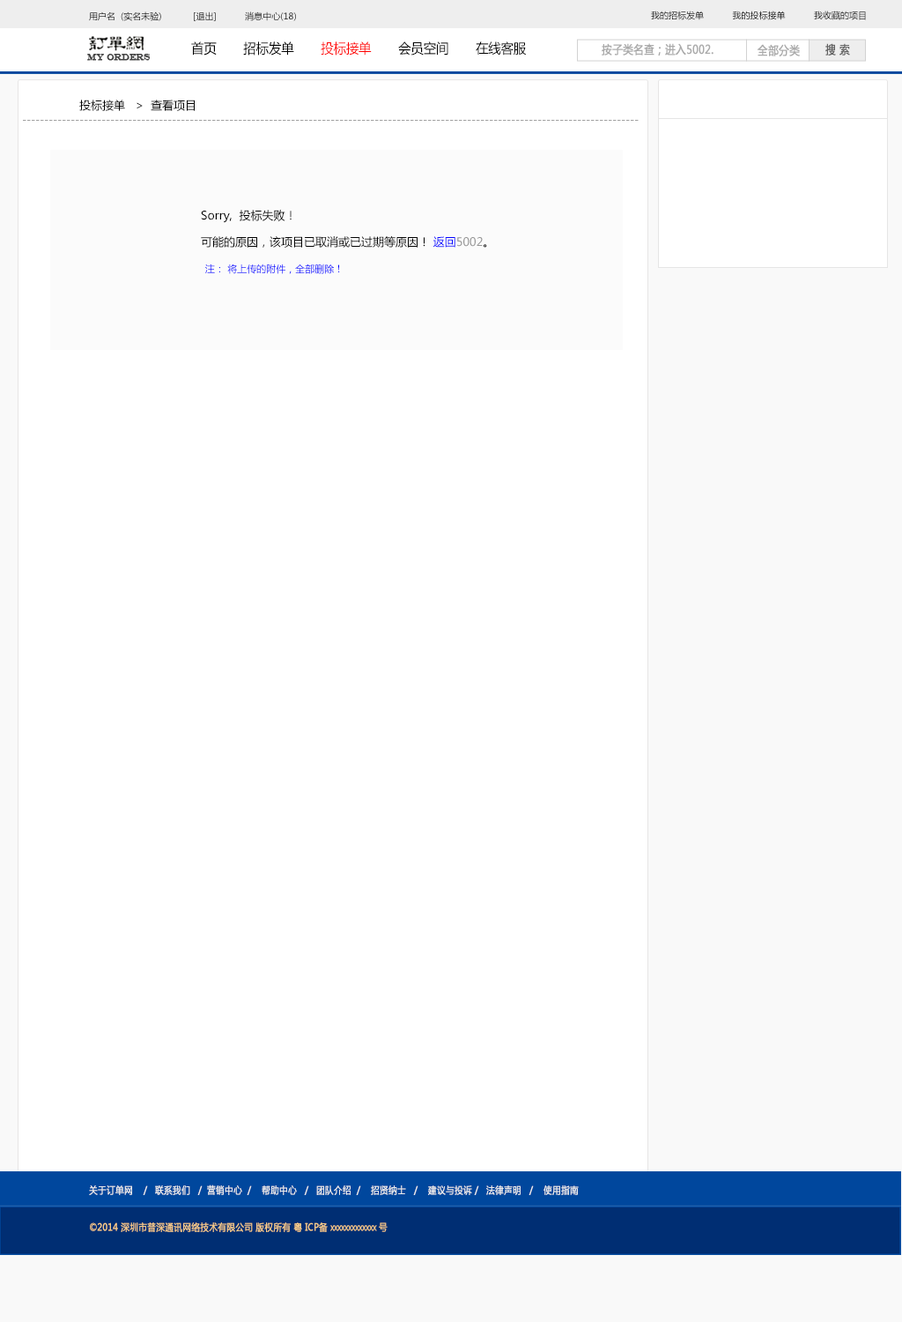
<style>
.page{position:relative;width:902px;height:1322px;background:#ffffff}
.page>*{position:absolute;margin:0}
.t1{font:8.8px "MicrosoftYaHei";color:#000000}
.t2{font:13.6px "MicrosoftYaHei";color:#000000;font-variant:small-caps;scale:0.94 1}
.t3{font:13.6px "MicrosoftYaHei";color:#ff0000;font-variant:small-caps;scale:0.94 1}
.t4{font:8.7px "EngraversMT";color:#434343;font-variant:small-caps;font-weight:bold;scale:0.86 1}
.t5{font:11.6px "MicrosoftYaHei";color:#aaaaaa;font-variant:small-caps;font-weight:bold;scale:0.86 1}
.t6{font:11.6px "MicrosoftYaHei";color:#626262;font-variant:small-caps;font-weight:bold;scale:0.86 1}
.t7{font:11.5px "MicrosoftYaHei";color:#000000}
.t8{font:10.6px "MicrosoftYaHei";color:#a0a0a0}
.t9{font:11.5px/26.4px "MicrosoftYaHei";color:#000000}
.t10{font:11.5px/26.4px "MicrosoftYaHei";color:#0000ff}
.t11{font:11.5px/26.4px "MicrosoftYaHei";color:#959595}
.t12{font:9.7px "MicrosoftYaHei";color:#0000ff}
.t13{font:9.7px "MicrosoftYaHei";color:#eeeeee;font-variant:small-caps;font-weight:bold;scale:0.86 1}
.t14{font:13.6px "STXihei";color:#eeeeee;font-variant:small-caps;font-weight:bold;scale:0.86 1}
.t15{font:9.7px "MicrosoftYaHei";color:#facd89;font-variant:small-caps;font-weight:bold;scale:0.87 1}
.t16{font:9.7px "MicrosoftYaHei";color:#eeeeee;font-variant:small-caps;font-weight:bold;scale:0.87 1}
</style>
<div class="page">
<p class="t1" style="left:89px;top:11px;width:207px;height:10px">用户名  (实名未验)            [退出]           消息中心(18)</p>
<p class="t1" style="left:651px;top:11px;width:215px;height:9px">我的招标发单           我的投标接单           我收藏的项目</p>
<p class="t2" style="left:191px;top:41px;width:336px;height:15px">首页       招标发单       <span class="t3">投标接单</span>       会员空间       在线客服</p>
<p class="t4" style="left:87px;top:54px;width:64px;height:7px">MY ORDERS</p>
<p class="t5" style="left:602px;top:43px;width:112px;height:13px">按子类名查；进入5002.</p>
<p class="t5" style="left:758px;top:44px;width:42px;height:12px">全部分类</p>
<p class="t6" style="left:826px;top:43px;width:24px;height:13px">搜 索</p>
<p class="t7" style="left:79px;top:100px;width:116px;height:11px">投标接单   &gt;  查看项目</p>
<p class="t8" style="left:23px;top:120px;width:616px;height:1px">--------------------------------------------------------------------------------------------------------------------------------------------</p>
<p class="t9" style="left:201px;top:210px;width:286px;height:38px">Sorry,  投标失败！<br>可能的原因，该项目已取消或已过期等原因！ <span class="t10">返回</span><span class="t11">5002</span>。</p>
<p class="t12" style="left:205px;top:263px;width:135px;height:11px">注： 将上传的附件，全部删除！</p>
<p class="t13" style="left:89px;top:1184px;width:490px;height:11px"><span class="t14"><br><br></span>关于订单网    /   联系我们   /  营销中心  /    帮助中心   /   团队介绍  /    招贤纳士   /    建议与投诉 /   法律声明   /    使用指南</p>
<p class="t15" style="left:90px;top:1222px;width:298px;height:10px"><span class="t16"> </span>©2014 深圳市普深通讯网络技术有限公司 版权所有 粤 ICP备 xxxxxxxxxxxxx 号</p>
</div>
